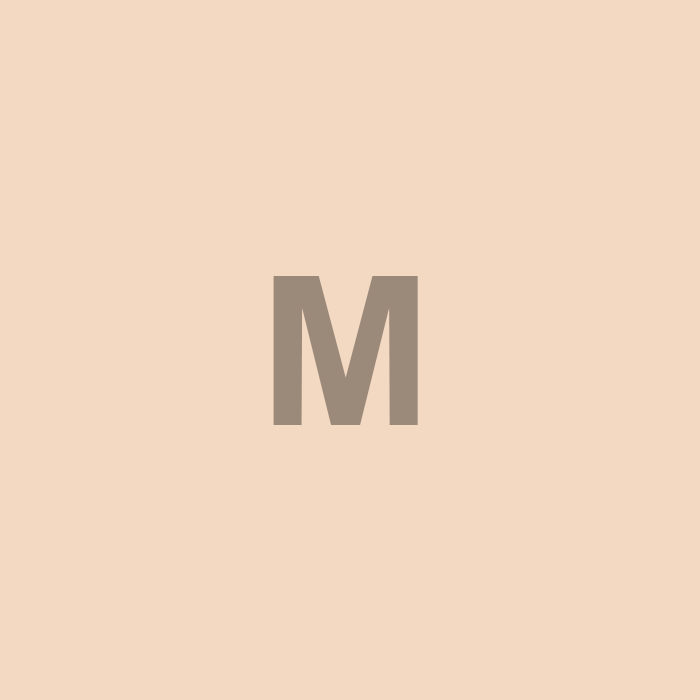
<style>
.page{position:relative;width:700px;height:700px;background:#f4d9c2}
.page>*{position:absolute;margin:0}
.t1{font:208.3px "Arial-BoldMT";letter-spacing:0.05em;color:#9b8a7a}
</style>
<div class="page">
<p class="t1" style="left:273px;top:276px;width:145px;height:149px">M</p>
</div>
